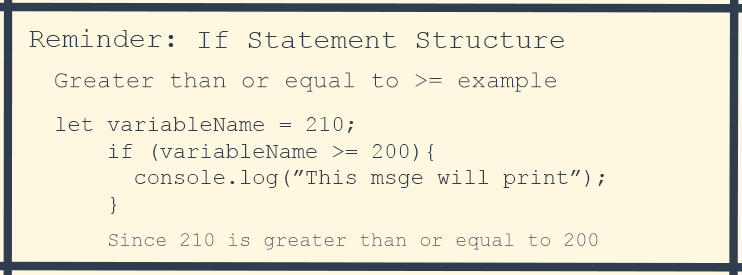
<style>
.page{position:relative;width:742px;height:275px;background:#fff8e1}
.page>*{position:absolute;margin:0}
.t1{font:28px "CourierNewPSMT";color:#303d4e}
.t2{font:24px "CourierNewPSMT";color:#303d4e}
.t3{font:22px "CourierNewPSMT";color:#303d4e}
.t4{font:24px "CourierNewPS-BoldItalicMT";color:#303d4e}
.t5{font:20px "CourierNewPSMT";color:#303d4e}
</style>
<div class="page">
<p class="t1" style="left:29px;top:29px;width:145px;height:18px">Reminder:</p>
<p class="t1" style="left:199px;top:31px;width:365px;height:17px">If Statement Structure</p>
<p class="t2" style="left:55px;top:72px;width:501px;height:20px">Greater than or equal to &gt;= example</p>
<p class="t3" style="left:56px;top:117px;width:548px;height:97px"><span class="t4">  <br><br> </span>let variableName = 210;<br>     if (variableName &gt;= 200){<br>       console.log(”This msge will print”);<br>     }</p>
<p class="t5" style="left:109px;top:233px;width:489px;height:17px">Since 210 is greater than or equal to 200</p>
</div>
